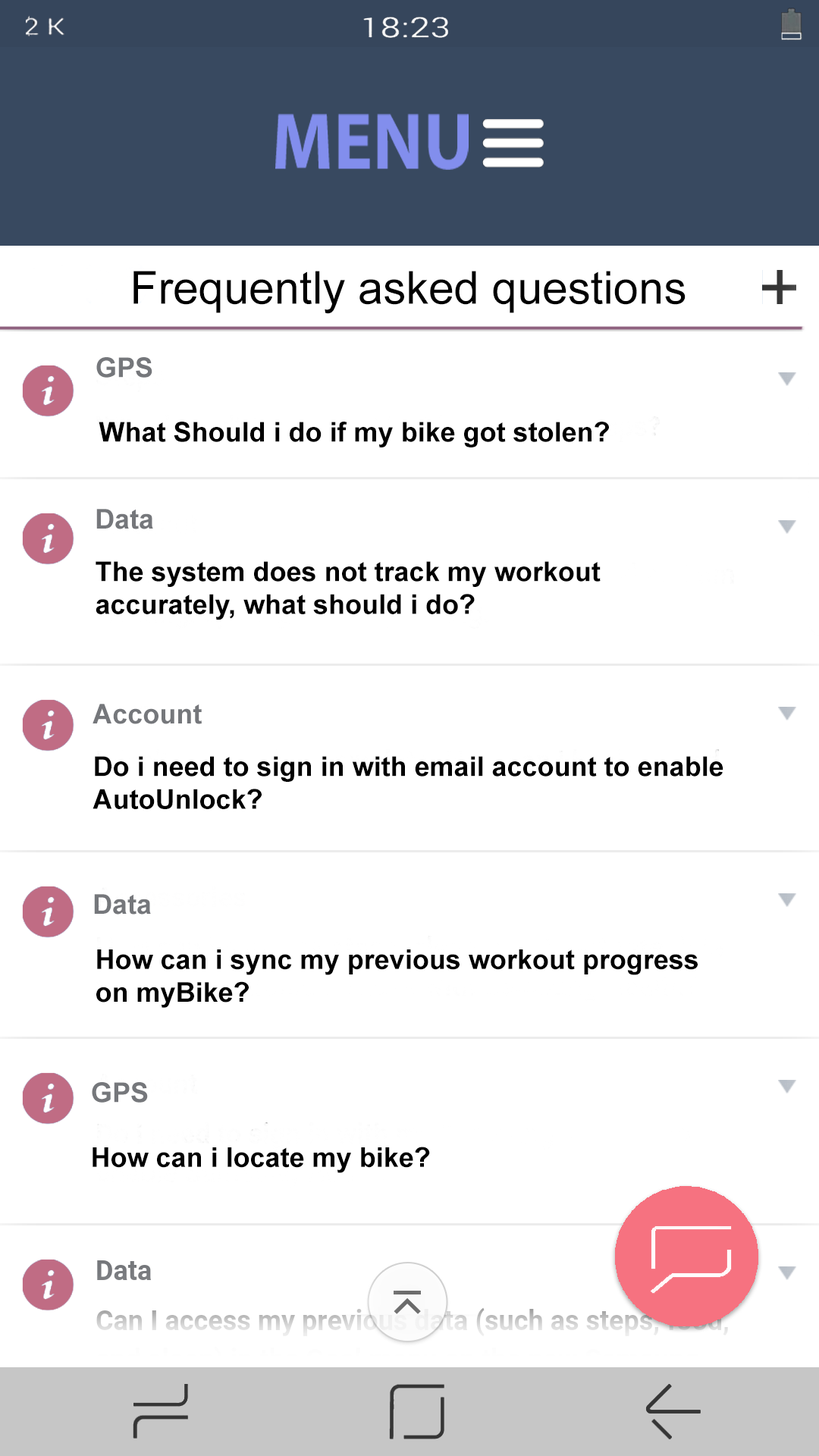
<style>
.page{position:relative;width:819px;height:1456px;background:#ffffff}
.page>*{position:absolute;margin:0}
.t1{font:45.5px "ArialMT";color:#000000}
.t2{font:27.3px "Arial-BoldMT";color:#75777b}
.t3{font:27.3px "Arial-BoldMT";color:#000000}
</style>
<div class="page">
<p class="t1" style="left:133px;top:271px;width:553px;height:43px">Frequently asked questions</p>
<p class="t2" style="left:96px;top:357px;width:56px;height:21px">GPS</p>
<p class="t3" style="left:99px;top:422px;width:510px;height:25px">What Should i do if my bike got stolen?</p>
<p class="t2" style="left:96px;top:509px;width:57px;height:20px">Data</p>
<p class="t3" style="left:96px;top:561px;width:505px;height:59px">The system does not track my workout <br>accurately, what should i do?</p>
<p class="t2" style="left:93px;top:704px;width:109px;height:20px">Account</p>
<p class="t3" style="left:93px;top:756px;width:630px;height:53px">Do i need to sign in with email account to enable AutoUnlock?</p>
<p class="t2" style="left:94px;top:894px;width:57px;height:21px">Data</p>
<p class="t3" style="left:96px;top:949px;width:602px;height:59px">How can i sync my previous workout progress on myBike?</p>
<p class="t2" style="left:92px;top:1082px;width:56px;height:21px">GPS</p>
<p class="t3" style="left:93px;top:1147px;width:337px;height:26px">How can i locate my bike?</p>
</div>
